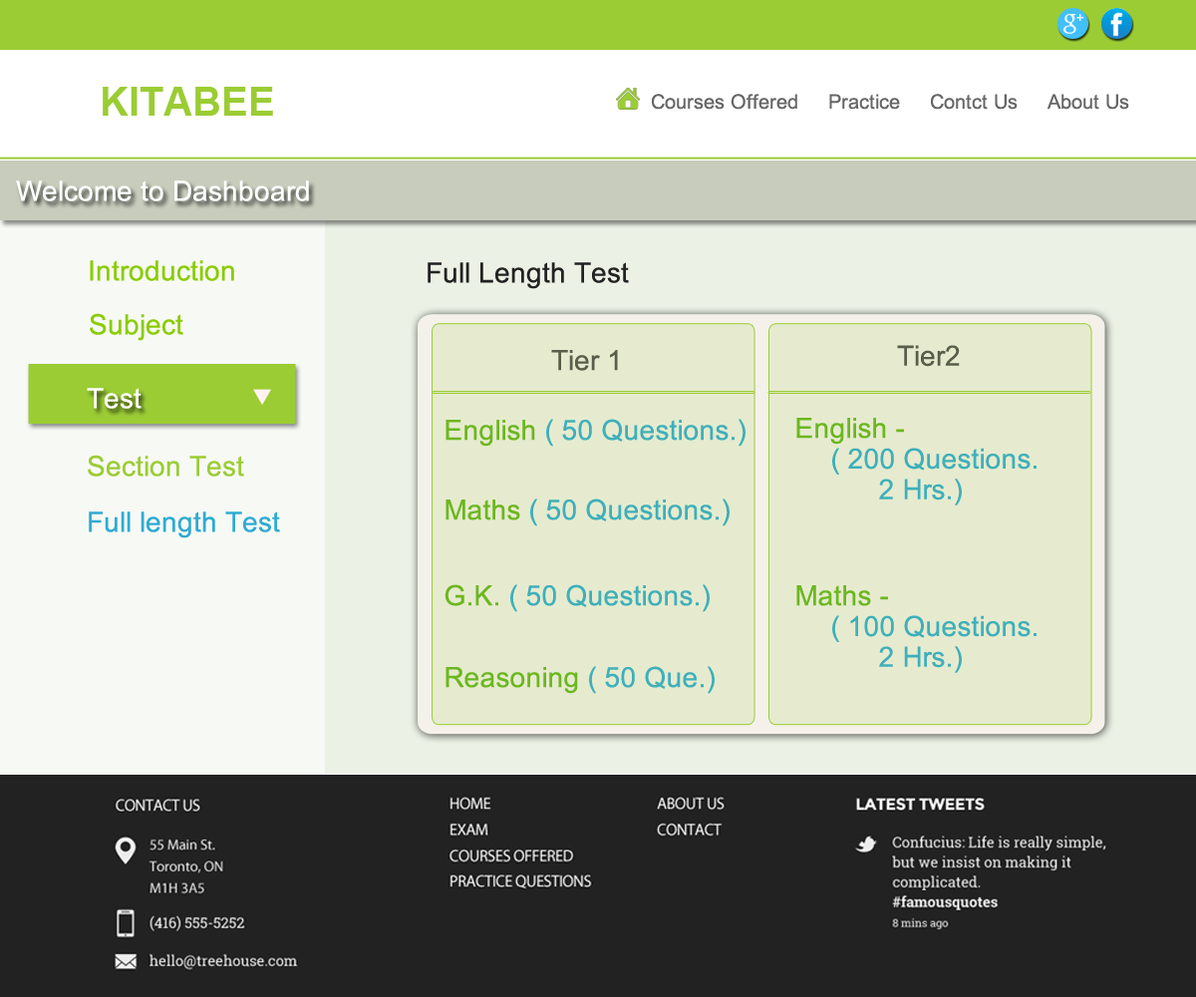
<style>
.page{position:relative;width:1196px;height:997px}
.page>*{position:absolute;margin:0}
.t1{font:39.9px "Arial-BoldMT";color:#9bcc34}
.t2{font:19.9px "ArialMT";color:#666666}
.t3{font:27.9px "ArialMT";color:#ffffff}
.t4{font:27.9px "ArialMT";color:#8acc00}
.t5{font:27.9px "ArialMT";color:#222222}
.t6{font:27.9px "ArialMT";color:#4d4b4e}
.t7{font:27.9px "ArialMT";color:#2faad2}
.t8{font:27.9px "ArialMT";color:#64b31d}
.t9{font:27.9px/30.7px "ArialMT";color:#2faad2}
.t10{font:27.9px/30.7px "ArialMT";color:#64b31d}
.t11{font:27.9px "ArialMT";color:#9bcc34}
</style>
<div class="page">
<p class="t1" style="left:103px;top:87px;width:170px;height:29px">KITABEE</p>
<p class="t2" style="left:652px;top:94px;width:477px;height:16px">Courses Offered     Practice     Contct Us     About Us</p>
<p class="t3" style="left:16px;top:180px;width:293px;height:21px">Welcome to Dashboard</p>
<p class="t4" style="left:90px;top:260px;width:144px;height:21px">Introduction</p>
<p class="t5" style="left:428px;top:262px;width:201px;height:27px">Full Length Test</p>
<p class="t4" style="left:90px;top:313px;width:93px;height:28px">Subject</p>
<p class="t6" style="left:551px;top:350px;width:67px;height:21px">Tier 1</p>
<p class="t6" style="left:897px;top:345px;width:63px;height:22px">Tier2</p>
<p class="t3" style="left:87px;top:388px;width:55px;height:21px">Test</p>
<p class="t7" style="left:446px;top:419px;width:300px;height:28px"><span class="t8">English </span>( 50 Questions.)</p>
<p class="t9" style="left:796px;top:418px;width:241px;height:87px"><span class="t10">English -<br></span> ( 200 Questions.<br>       2 Hrs.)</p>
<p class="t11" style="left:88px;top:455px;width:156px;height:21px">Section Test</p>
<p class="t7" style="left:446px;top:498px;width:284px;height:28px"><span class="t8">Maths</span> ( 50 Questions.)</p>
<p class="t7" style="left:89px;top:511px;width:191px;height:27px">Full length Test</p>
<p class="t7" style="left:445px;top:584px;width:265px;height:28px"><span class="t8">G.K.</span> ( 50 Questions.)</p>
<p class="t9" style="left:796px;top:585px;width:241px;height:88px"><span class="t10">Maths -<br></span> ( 100 Questions.<br>       2 Hrs.)</p>
<p class="t7" style="left:446px;top:666px;width:269px;height:28px"><span class="t8">Reasoning </span>( 50 Que.)</p>
</div>
